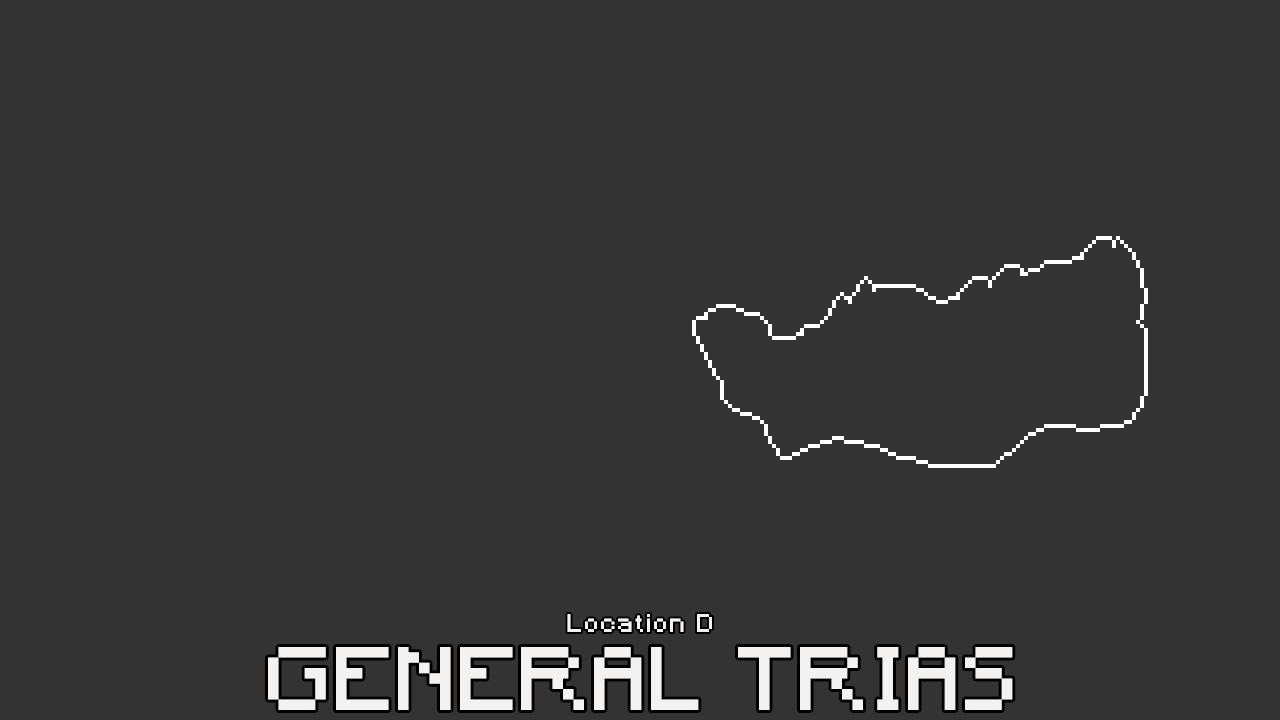
<style>
.page{position:relative;width:1280px;height:720px;background:#333333}
.page>*{position:absolute;margin:0}
.t1{font:24px "Minecraft";letter-spacing:0.1em;color:#f4f1f1}
.t2{font:84px "Minecraft";letter-spacing:0.05em;color:#f4f1f1}
</style>
<div class="page">
<p class="t1" style="left:567px;top:614px;width:145px;height:18px">Location D</p>
<p class="t2" style="left:268px;top:647px;width:745px;height:63px">GENERAL TRIAS</p>
</div>
